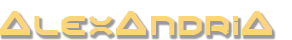
<style>
.page{position:relative;width:292px;height:40px;background:#ffffff}
.page>*{position:absolute;margin:0}
.t1{font:28px "Oberon";color:#fcd578}
.t2{font:36px "Oberon";color:#fcd578}
</style>
<div class="page">
<p class="t1" style="left:0px;top:11px;width:272px;height:24px"><span class="t2">A</span>lex<span class="t2">a</span>ndri<span class="t2">a</span></p>
</div>
